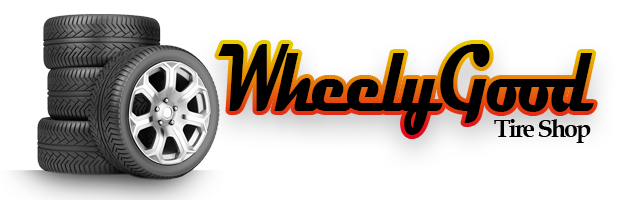
<style>
.page{position:relative;width:635px;height:200px;background:#ffffff}
.page>*{position:absolute;margin:0}
.t1{font:97.7px/3484.5px "ComicSansMS-Bold";letter-spacing:-0.08em;color:#000000;scale:0.66 1}
.t2{font:97.7px/3484.5px "Magneto-Bold";letter-spacing:-0.08em;color:#000000;scale:0.66 1}
.t3{font:25px "BookAntiqua-Bold";letter-spacing:-0.08em;color:#000000}
</style>
<div class="page">
<p class="t1" style="left:218px;top:44px;width:376px;height:91px"><span class="t2">WheelyGood<br></span>Tire Shop<br>TireShop<br>Tire<br><br>Tires</p>
<p class="t3" style="left:494px;top:119px;width:97px;height:24px">Tire Shop</p>
</div>
